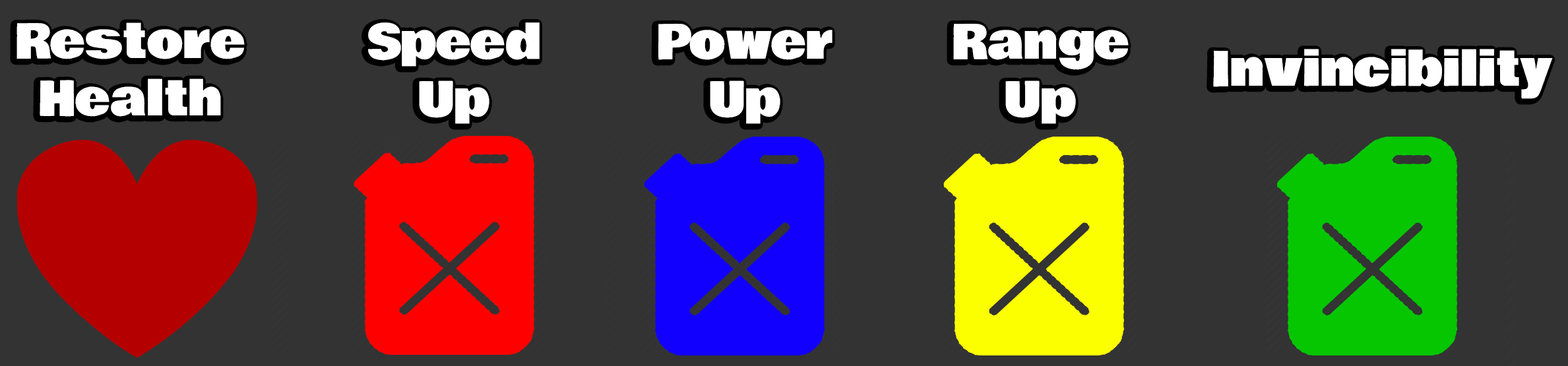
<style>
.page{position:relative;width:1568px;height:366px;background:#333333}
.page>*{position:absolute;margin:0}
.t1{font:47.5px "BowlbyOne";color:#ffffff}
</style>
<div class="page">
<p class="t1" style="left:16px;top:22px;width:229px;height:95px;text-align:center">Restore<br>Health</p>
<p class="t1" style="left:368px;top:22px;width:172px;height:102px;text-align:center">Speed<br>Up</p>
<p class="t1" style="left:658px;top:24px;width:174px;height:100px;text-align:center">Power<br>Up</p>
<p class="t1" style="left:953px;top:24px;width:176px;height:100px;text-align:center">Range<br>Up</p>
<p class="t1" style="left:1213px;top:49px;width:340px;height:50px">Invincibility</p>
</div>
